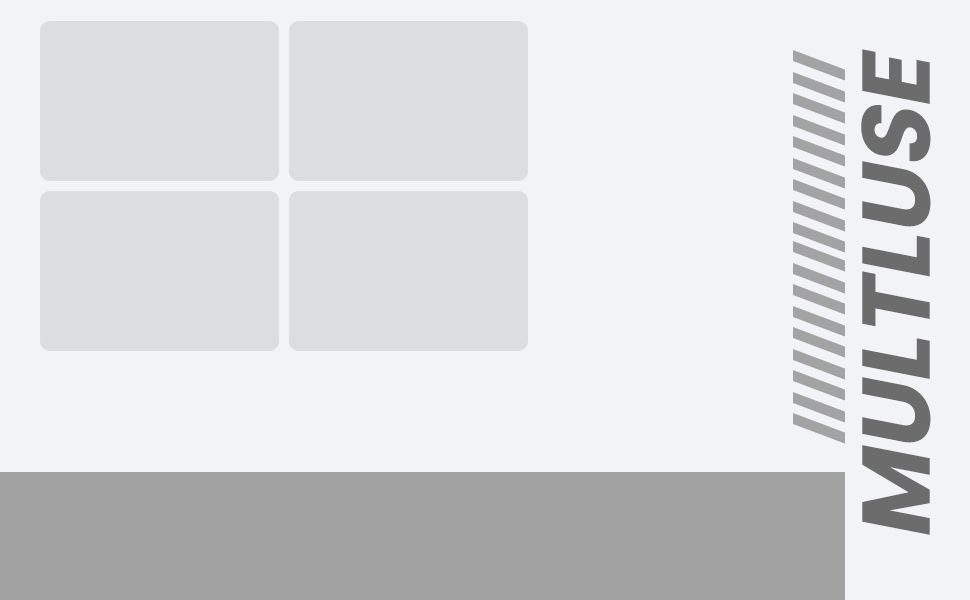
<style>
.page{position:relative;width:970px;height:600px;background:#f2f3f6}
.page>*{position:absolute;margin:0}
.t1{font:96px "Poppins-Bold";color:#6c6c6c;text-transform:uppercase;font-style:italic}
</style>
<div class="page">
<p class="t1" style="left:861px;top:49px;width:70px;height:486px;rotate:180deg">MULtluse</p>
</div>
